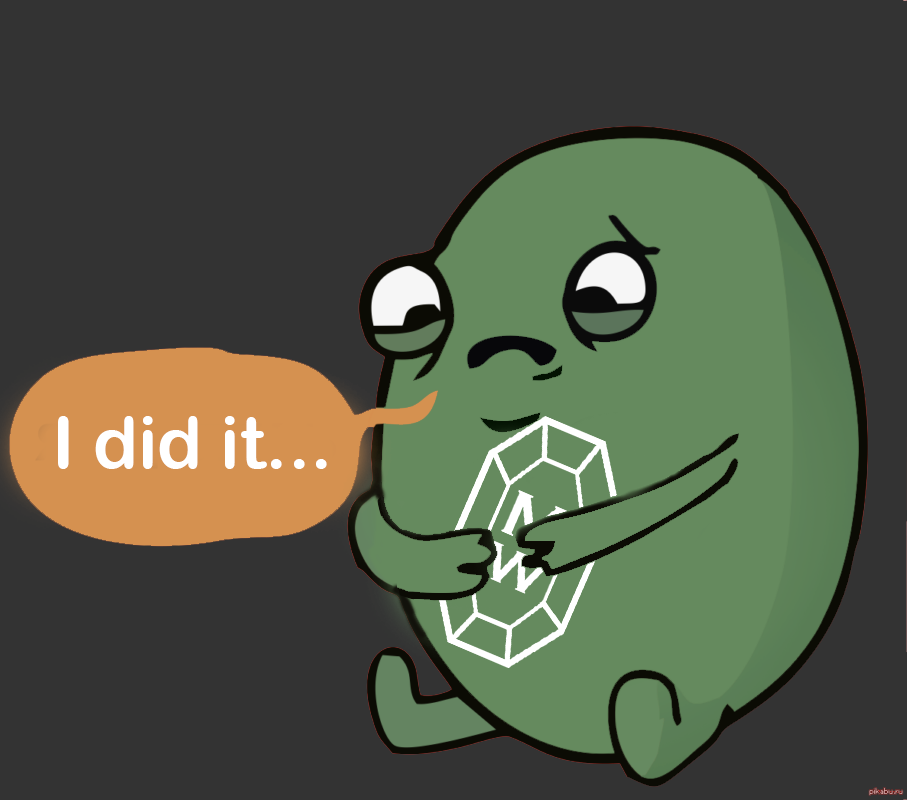
<style>
.page{position:relative;width:907px;height:800px;background:#333333}
.page>*{position:absolute;margin:0}
.t1{font:72px "ArialRoundedMTBold";color:#ffffff}
</style>
<div class="page">
<p class="t1" style="left:58px;top:416px;width:269px;height:53px">I did it...</p>
</div>
